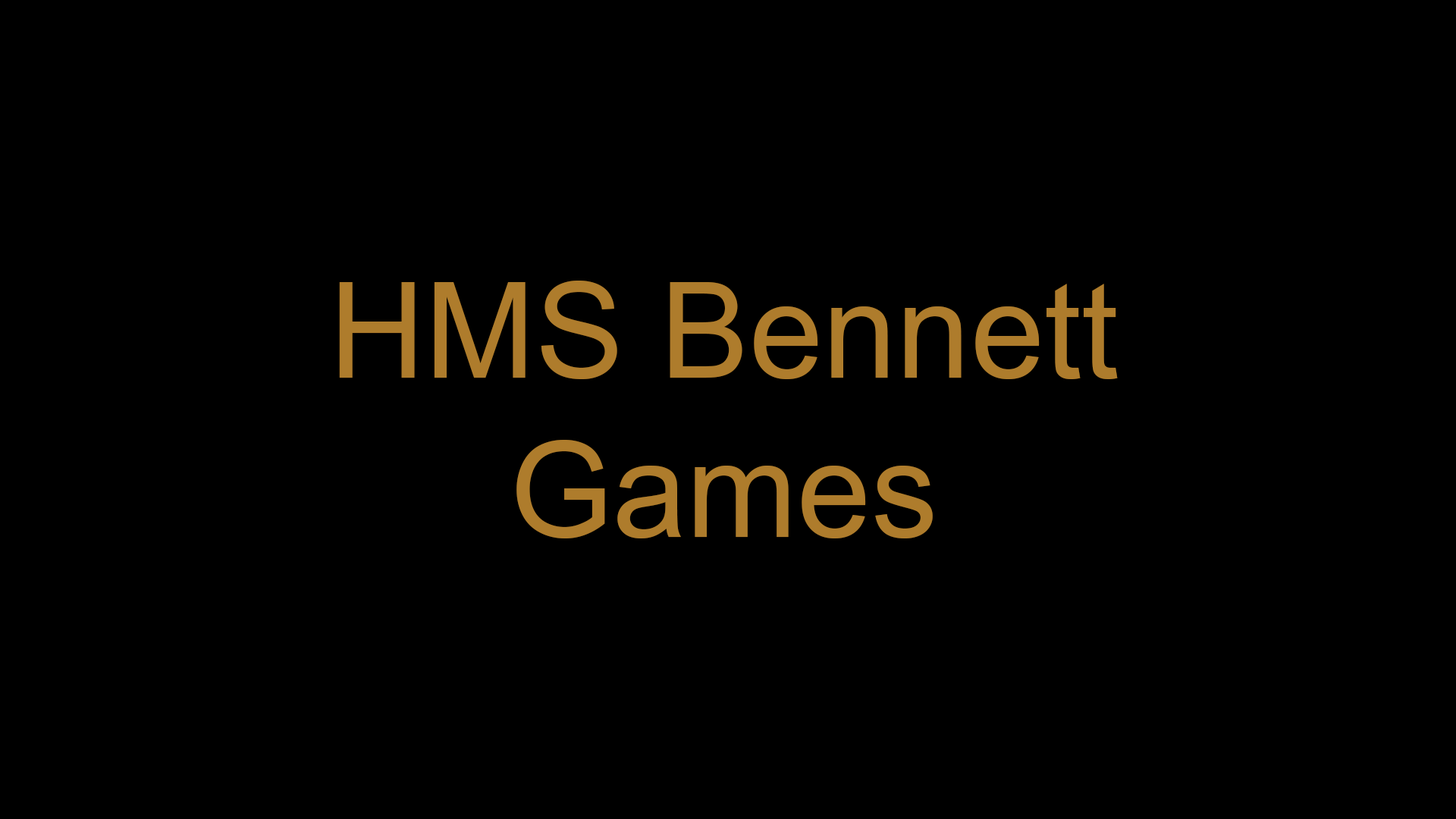
<style>
.page{position:relative;width:1456px;height:819px;background:#000000}
.page>*{position:absolute;margin:0}
.t1{font:132.7px "ArialMT";color:#ae7c2c}
</style>
<div class="page">
<p class="t1" style="left:339px;top:281px;width:779px;height:257px;text-align:center">HMS Bennett<br>Games</p>
</div>
